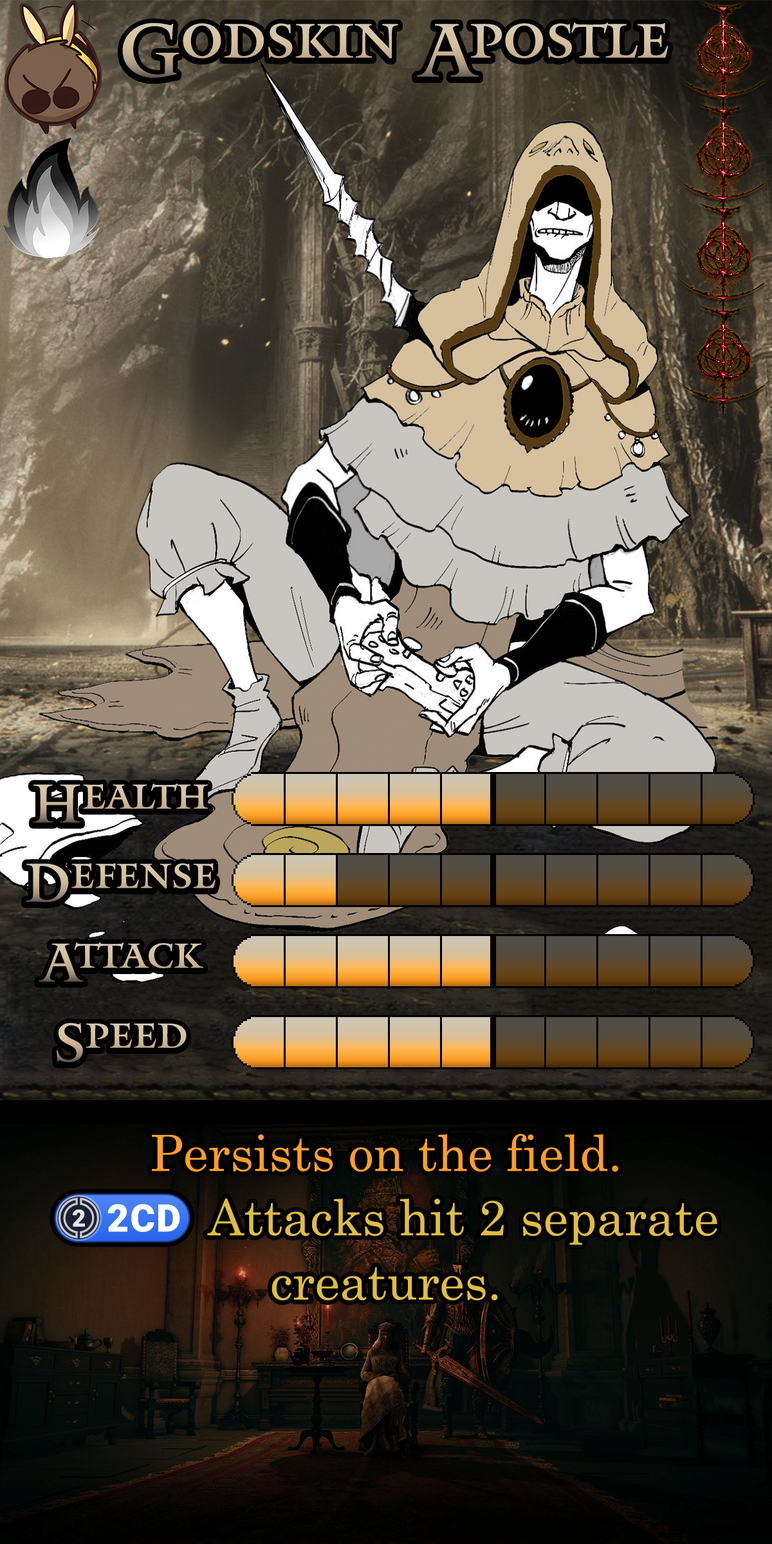
<style>
.page{position:relative;width:772px;height:1544px}
.page>*{position:absolute;margin:0}
.t1{font:128.7px "Mantinia";color:#d3bf9a}
.t2{font:92.7px "Mantinia"}
.t3{font:92.7px "Mantinia";color:#d2c09c}
.t4{font:85.6px/64.3px "Century"}
.t5{font:85.6px/64.3px "stoogedings-Regular"}
</style>
<div class="page">
<p class="t1" style="left:122px;top:23px;width:547px;height:55px">Godskin Apostle</p>
<p class="t2" style="left:33px;top:783px;width:175px;height:40px">Health</p>
<p class="t2" style="left:26px;top:863px;width:190px;height:40px">Defense</p>
<p class="t2" style="left:39px;top:943px;width:164px;height:39px">Attack</p>
<p class="t3" style="left:57px;top:1023px;width:130px;height:39px">Speed</p>
<p class="t4" style="left:54px;top:1134px;width:663px;height:167px;text-align:center">Persists on the field.<br><span class="t5">(2CD) </span>Attacks hit 2 separate creatures.</p>
</div>
